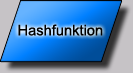
<style>
.page{position:relative;width:133px;height:73px}
.page>*{position:absolute;margin:0}
.t1{font:14.7px "ArialMT";color:#000000}
</style>
<div class="page">
<p class="t1" style="left:18px;top:24px;width:85px;height:12px">Hashfunktion</p>
</div>
